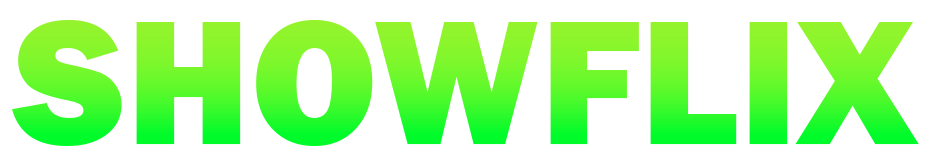
<style>
.page{position:relative;width:931px;height:165px;background:#ffffff}
.page>*{position:absolute;margin:0}
.t1{font:183.3px "FranklinGothic-Heavy";letter-spacing:0.001em}
</style>
<div class="page">
<p class="t1" style="left:12px;top:20px;width:907px;height:126px">SHOWFLIX</p>
</div>
